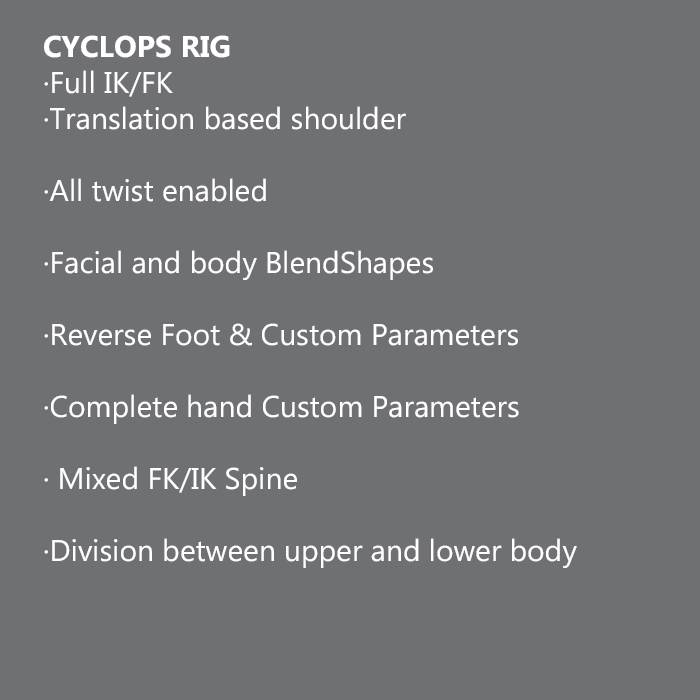
<style>
.page{position:relative;width:700px;height:700px;background:#6e7073}
.page>*{position:absolute;margin:0}
.t1{font:30px "MicrosoftPhagsPa";color:#ffffff}
.t2{font:30px "MicrosoftPhagsPa-Bold";color:#ffffff}
</style>
<div class="page">
<p class="t1" style="left:44px;top:35px;width:533px;height:533px"><span class="t2">CYCLOPS RIG<br></span>·Full IK/FK<br>·Translation based shoulder<br><br>·All twist enabled<br><br>·Facial and body BlendShapes<br><br>·Reverse Foot &amp; Custom Parameters<br><br>·Complete hand Custom Parameters<br><br>· Mixed FK/IK Spine<br><br>·Division between upper and lower body</p>
</div>
